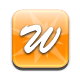
<style>
.page{position:relative;width:80px;height:80px;background:#ffffff}
.page>*{position:absolute;margin:0}
.t1{font:40px "BrushScriptStd";color:#ffffff}
</style>
<div class="page">
<p class="t1" style="left:20px;top:24px;width:41px;height:30px">W</p>
</div>
